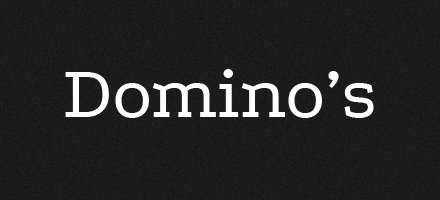
<style>
.page{position:relative;width:440px;height:200px}
.page>*{position:absolute;margin:0}
.t1{font:76px "Podkova-Regular";letter-spacing:-0.02em;color:#ffffff}
</style>
<div class="page">
<p class="t1" style="left:65px;top:69px;width:309px;height:49px">Domino’s</p>
</div>
